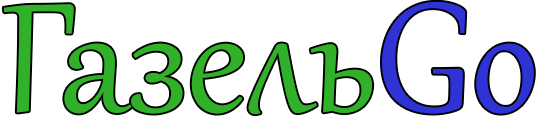
<style>
.page{position:relative;width:538px;height:116px;background:#ffffff}
.page>*{position:absolute;margin:0}
.t1{font:190px "Gabriola";color:#31b12a}
.t2{font:190px "Gabriola";color:#2f32d4}
</style>
<div class="page">
<p class="t1" style="left:3px;top:1px;width:531px;height:114px">Газель<span class="t2">Go</span></p>
</div>
